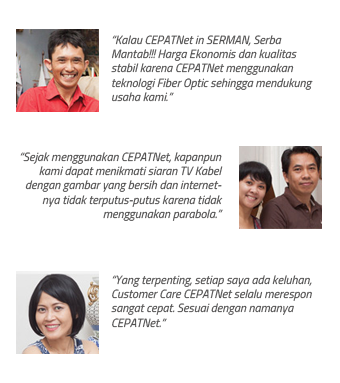
<style>
.page{position:relative;width:340px;height:383px;background:#ffffff}
.page>*{position:absolute;margin:0}
.t1{font:12px "TitilliumWeb-Italic";color:#515050}
</style>
<div class="page">
<p class="t1" style="left:111px;top:35px;width:202px;height:67px">“Kalau CEPATNet in SERMAN, Serba Mantab!!! Harga Ekonomis dan kualitas stabil karena CEPATNet menggunakan teknologi Fiber Optic sehingga mendukung usaha kami.”</p>
<p class="t1" style="left:20px;top:152px;width:203px;height:69px;text-align:right">“Sejak menggunakan CEPATNet, kapanpun kami dapat menikmati siaran TV Kabel dengan gambar yang bersih dan internetnya tidak terputus-putus karena tidak menggunakan parabola.”</p>
<p class="t1" style="left:111px;top:275px;width:201px;height:53px">“Yang terpenting, setiap saya ada keluhan, Customer Care CEPATNet selalu merespon sangat cepat. Sesuai dengan namanya CEPATNet.”</p>
</div>
